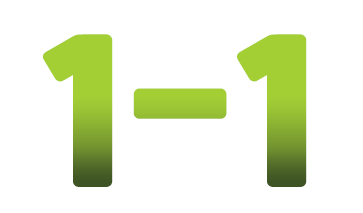
<style>
.page{position:relative;width:363px;height:213px;background:#ffffff}
.page>*{position:absolute;margin:0}
.t1{font:182.7px "TTTogether"}
</style>
<div class="page">
<p class="t1" style="left:43px;top:34px;width:264px;height:153px">1-1</p>
</div>
